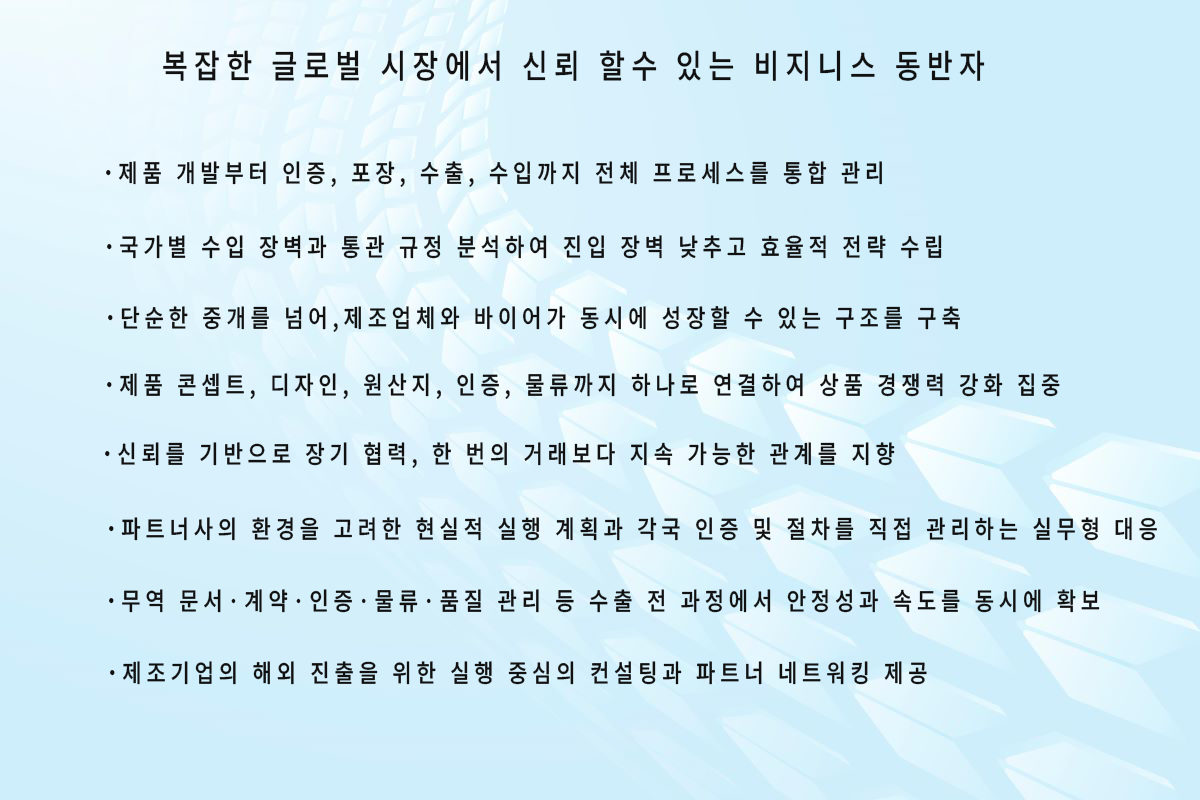
<style>
.page{position:relative;width:1200px;height:800px}
.page>*{position:absolute;margin:0}
.t1{font:56.2px "NotoSansKR-Medium";letter-spacing:0.23em;color:#111111;scale:0.85 1}
.t2{font:42.1px "NotoSansKR-Medium";letter-spacing:0.23em;color:#111111;scale:0.85 1}
</style>
<div class="page">
<p class="t1" style="left:163px;top:50px;width:822px;height:31px">복잡한 글로벌 시장에서 신뢰 할수 있는 비지니스 동반자</p>
<p class="t2" style="left:106px;top:161px;width:776px;height:26px">˙제품 개발부터 인증, 포장, 수출, 수입까지 전체 프로세스를 통합 관리</p>
<p class="t2" style="left:107px;top:235px;width:835px;height:24px">˙국가별 수입 장벽과 통관 규정 분석하여 진입 장벽 낮추고 효율적 전략 수립</p>
<p class="t2" style="left:108px;top:306px;width:852px;height:26px">˙단순한 중개를 넘어,제조업체와 바이어가 동시에 성장할 수 있는 구조를 구축</p>
<p class="t2" style="left:107px;top:373px;width:953px;height:26px">˙제품 콘셉트, 디자인, 원산지, 인증, 물류까지 하나로 연결하여 상품 경쟁력 강화 집중</p>
<p class="t2" style="left:105px;top:442px;width:790px;height:26px">˙신뢰를 기반으로 장기 협력, 한 번의 거래보다 지속 가능한 관계를 지향</p>
<p class="t2" style="left:109px;top:517px;width:1048px;height:24px">˙파트너사의 환경을 고려한 현실적 실행 계획과 각국 인증 및 절차를 직접 관리하는 실무형 대응</p>
<p class="t2" style="left:109px;top:589px;width:991px;height:24px">˙무역 문서·계약·인증·물류·품질 관리 등 수출 전 과정에서 안정성과 속도를 동시에 확보</p>
<p class="t2" style="left:110px;top:661px;width:817px;height:24px">˙제조기업의 해외 진출을 위한 실행 중심의 컨설팅과 파트너 네트워킹 제공</p>
</div>
